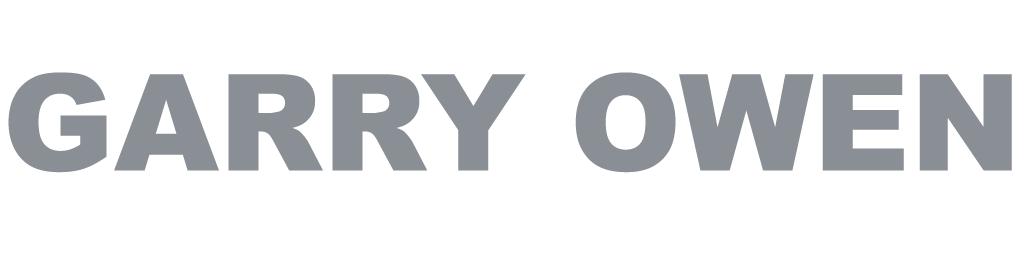
<style>
.page{position:relative;width:1024px;height:256px;background:#ffffff}
.page>*{position:absolute;margin:0}
.t1{font:134px "Arial-Black";color:#898f94;text-transform:uppercase}
</style>
<div class="page">
<p class="t1" style="left:8px;top:72px;width:1004px;height:101px">Garry Owen</p>
</div>
